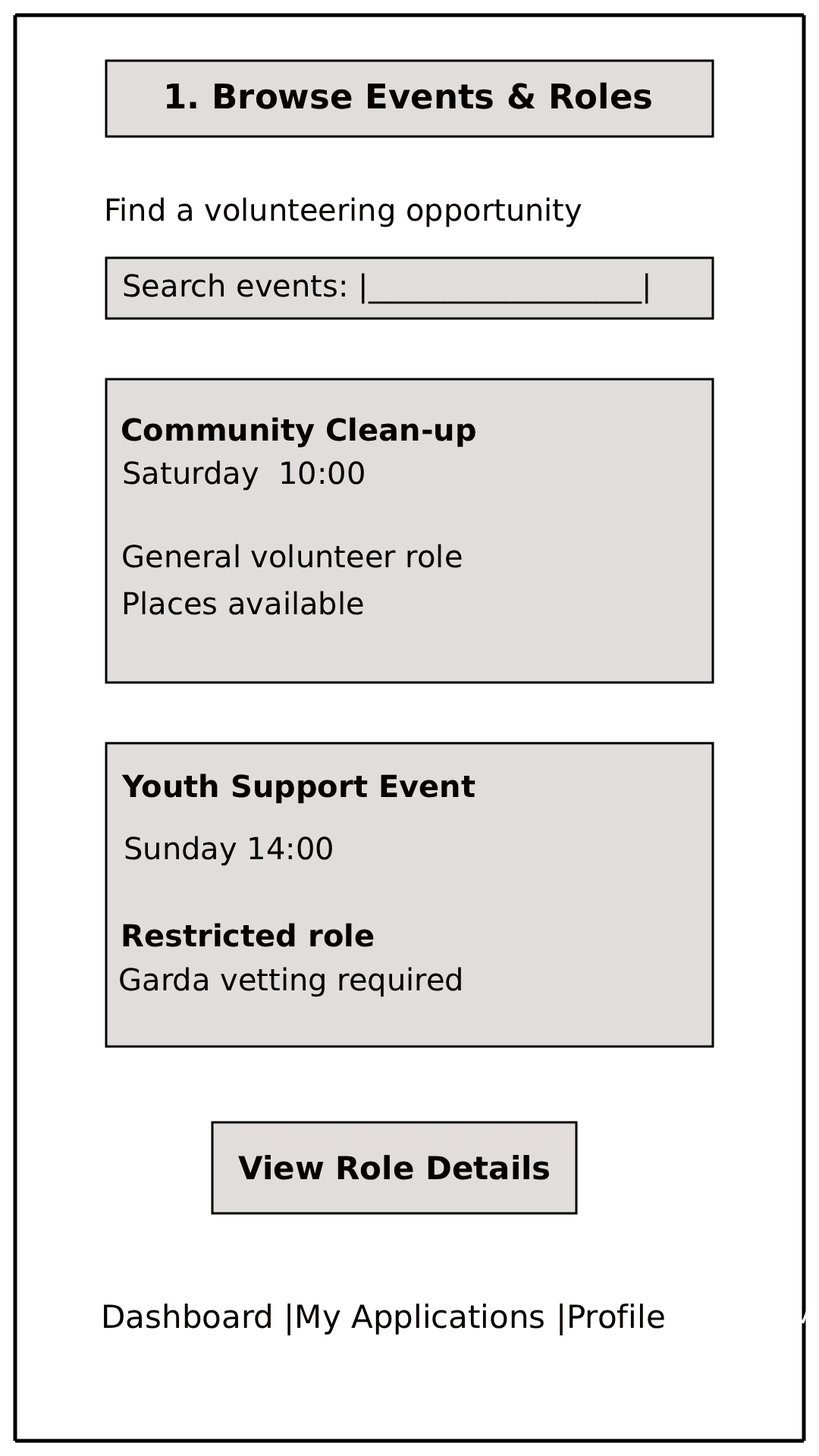
<style>
.page{position:relative;width:819px;height:1456px;background:#ffffff}
.page>*{position:absolute;margin:0}
.t1{font:34.1px "DejaVuSans-Bold";color:#060000}
.t2{font:30.3px "DejaVuSans";color:#060000}
.t3{font:30.3px "DejaVuSans-Bold";color:#060000}
.t4{font:31.8px "DejaVuSans-Bold";color:#060000}
</style>
<div class="page">
<p class="t1" style="left:167px;top:82px;width:484px;height:27px">1. Browse Events &amp; Roles</p>
<p class="t2" style="left:106px;top:197px;width:476px;height:30px">Find a volunteering opportunity</p>
<p class="t2" style="left:124px;top:273px;width:524px;height:31px">Search events: |__________________|</p>
<p class="t3" style="left:121px;top:417px;width:354px;height:30px">Community Clean-up</p>
<p class="t2" style="left:124px;top:460px;width:240px;height:31px">Saturday  10:00</p>
<p class="t2" style="left:123px;top:544px;width:339px;height:24px">General volunteer role</p>
<p class="t2" style="left:124px;top:591px;width:239px;height:24px">Places available</p>
<p class="t3" style="left:121px;top:773px;width:354px;height:31px">Youth Support Event</p>
<p class="t2" style="left:125px;top:836px;width:207px;height:30px">Sunday 14:00</p>
<p class="t3" style="left:123px;top:923px;width:251px;height:24px">Restricted role</p>
<p class="t2" style="left:120px;top:967px;width:341px;height:30px">Garda vetting required</p>
<p class="t4" style="left:238px;top:1155px;width:312px;height:25px">View Role Details</p>
</div>
